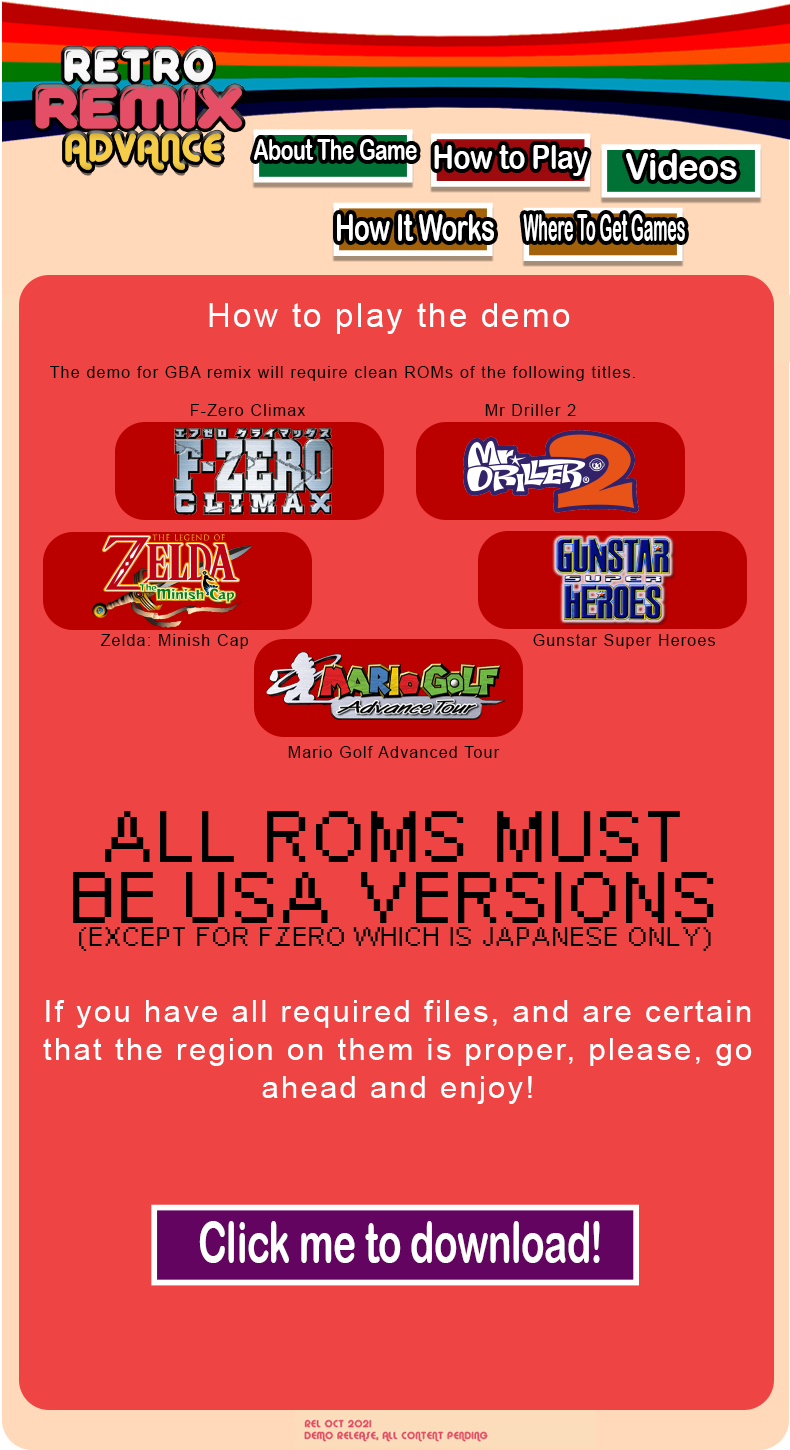
<style>
.page{position:relative;width:790px;height:1450px;background:#ef4444}
.page>*{position:absolute;margin:0}
.t1{font:28.6px "ArialRoundedMTBold";letter-spacing:-0.01em;color:#ffffff;scale:0.72 1}
.t2{font:33.9px "ArialRoundedMTBold";letter-spacing:-0.01em;color:#ffffff;scale:0.82 1}
.t3{font:37.5px "ArialRoundedMTBold";letter-spacing:-0.01em;color:#ffffff;scale:0.92 1}
.t4{font:37.5px "ArialRoundedMTBold";letter-spacing:-0.01em;color:#ffffff;scale:0.68 1}
.t5{font:37.5px "ArialRoundedMTBold";letter-spacing:-0.01em;color:#ffffff;scale:0.43 1}
.t6{font:32.7px "ArialMT";letter-spacing:0.075em;color:#ffffff}
.t7{font:16px "ArialMT";letter-spacing:0.075em;color:#000000}
.t8{font:19px "PixelArial11";letter-spacing:0.075em;color:#000000}
.t9{font:51px "PixelArial11";letter-spacing:0.075em;color:#000000}
.t10{font:31px/38.1px "ArialMT";letter-spacing:0.075em;color:#ffffff}
.t11{font:56.9px "ArialRoundedMTBold";letter-spacing:-0.01em;color:#ffffff;scale:0.68 1}
</style>
<div class="page">
<p class="t1" style="left:254px;top:139px;width:163px;height:21px">About The Game</p>
<p class="t2" style="left:434px;top:145px;width:154px;height:31px">How to Play</p>
<p class="t3" style="left:626px;top:153px;width:111px;height:27px">Videos</p>
<p class="t4" style="left:337px;top:214px;width:157px;height:27px">How It Works</p>
<p class="t5" style="left:523px;top:214px;width:162px;height:27px">Where To Get Games</p>
<p class="t6" style="left:209px;top:303px;width:361px;height:31px">How to play the demo</p>
<p class="t7" style="left:50px;top:366px;width:585px;height:15px">The demo for GBA remix will require clean ROMs of the following titles.</p>
<p class="t7" style="left:191px;top:404px;width:114px;height:12px">F-Zero Climax</p>
<p class="t7" style="left:485px;top:404px;width:91px;height:12px">Mr Driller 2</p>
<p class="t7" style="left:100px;top:634px;width:149px;height:15px">Zelda: Minish Cap</p>
<p class="t7" style="left:533px;top:634px;width:182px;height:15px">Gunstar Super Heroes</p>
<p class="t7" style="left:288px;top:746px;width:212px;height:12px">Mario Golf Advanced Tour</p>
<p class="t8" style="left:73px;top:811px;width:641px;height:140px;text-align:center"><span class="t9">ALL ROMS MUST BE USA VERSIONS </span>(EXCEPT FOR FZERO WHICH IS JAPANESE ONLY)</p>
<p class="t10" style="left:43px;top:1000px;width:709px;height:104px;text-align:center">If you have all required files, and are certain<br>that the region on them is proper, please, go<br>ahead and enjoy!</p>
<p class="t11" style="left:199px;top:1221px;width:401px;height:42px">Click me to download!</p>
</div>
